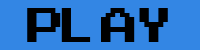
<style>
.page{position:relative;width:200px;height:50px;background:#3386e4}
.page>*{position:absolute;margin:0}
.t1{font:66.7px "ArcadeClassic";color:#000000}
</style>
<div class="page">
<p class="t1" style="left:27px;top:8px;width:141px;height:34px">PLAY</p>
</div>
